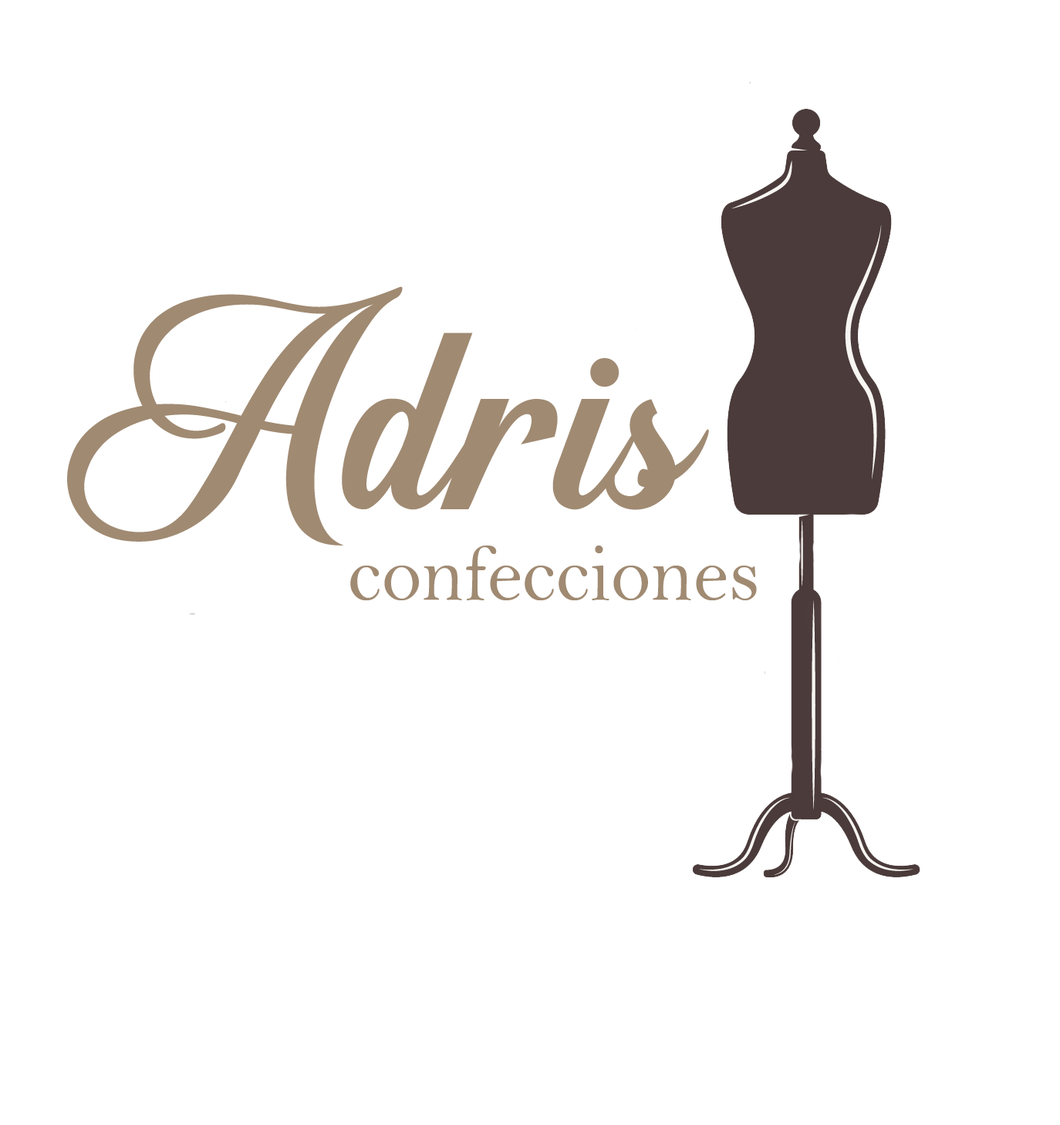
<style>
.page{position:relative;width:1060px;height:1125px;background:#ffffff}
.page>*{position:absolute;margin:0}
.t1{font:306.1px "Sunshine";color:#a08a72}
.t2{font:81.2px "BellMT";color:#a08a72}
</style>
<div class="page">
<p class="t1" style="left:67px;top:286px;width:642px;height:259px">Adris</p>
<p class="t2" style="left:350px;top:545px;width:407px;height:55px">confecciones</p>
</div>
